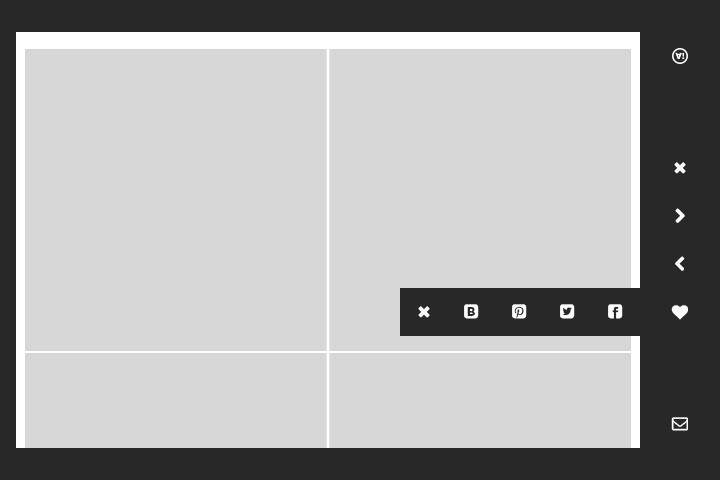
<style>
.page{position:relative;width:720px;height:480px;background:#d7d7d7}
.page>*{position:absolute;margin:0}
.t1{font:12px "HelveticaNeueCyr-Heavy";color:#282828}
</style>
<div class="page">
<p class="t1" style="left:467px;top:307px;width:8px;height:9px">В</p>
</div>
